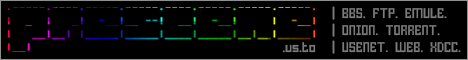
<style>
.page{position:relative;width:468px;height:60px;background:#000000}
.page>*{position:absolute;margin:0}
.t1{font:14px "HomespunTTBRK";color:#7b7b7b}
</style>
<div class="page">
<p class="t1" style="left:332px;top:6px;width:129px;height:48px">| BBS. FTP. EMULE.<br>| ONION. TORRENT.<br>| USENET. WEB. XDCC.</p>
<p class="t1" style="left:282px;top:42px;width:34px;height:11px">.us.to</p>
</div>
